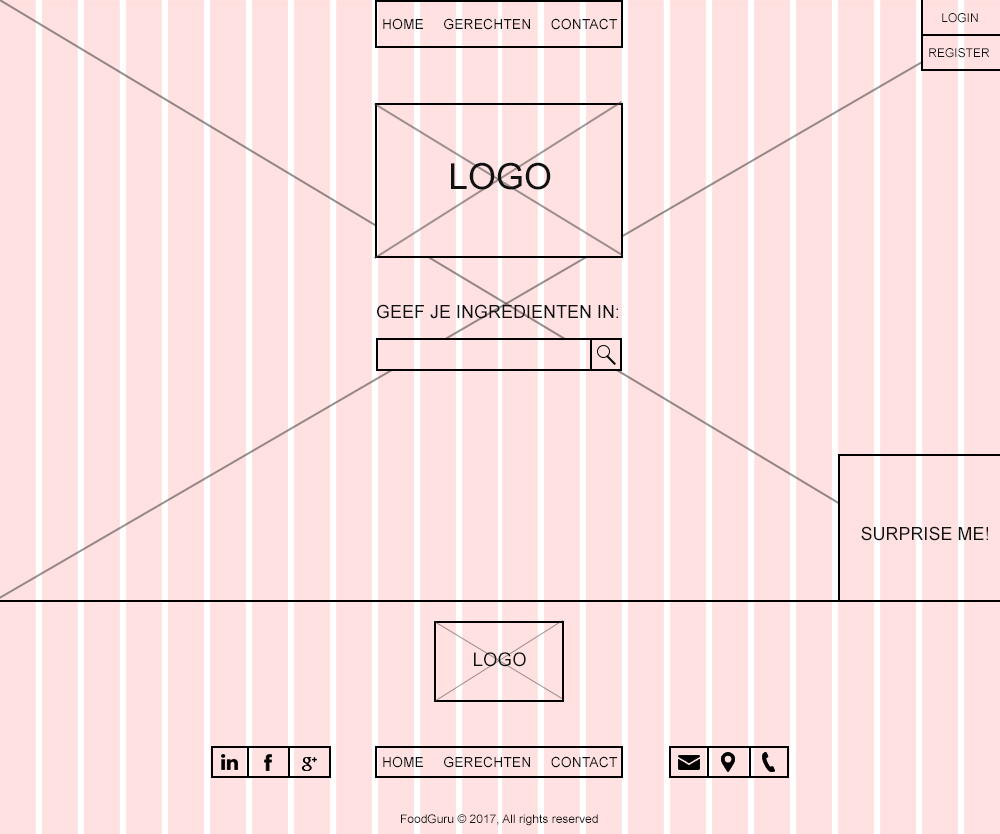
<style>
.page{position:relative;width:1000px;height:834px;background:#ffe1e1}
.page>*{position:absolute;margin:0}
.t1{font:12px "ArialMT";color:#111111}
.t2{font:14px "ArialMT";color:#111111}
.t3{font:36.1px "ArialMT";color:#111111}
.t4{font:18px "ArialMT";color:#111111}
.t5{font:18.7px "ArialMT";color:#111111}
.t6{font:11.8px "ArialMT";color:#111111}
</style>
<div class="page">
<p class="t1" style="left:942px;top:13px;width:36px;height:10px">LOGIN</p>
<p class="t2" style="left:383px;top:18px;width:234px;height:12px">HOME     GERECHTEN     CONTACT</p>
<p class="t1" style="left:929px;top:48px;width:60px;height:10px">REGISTER</p>
<p class="t3" style="left:451px;top:162px;width:100px;height:28px">LOGO</p>
<p class="t4" style="left:377px;top:304px;width:241px;height:15px">GEEF JE INGREDIENTEN IN:</p>
<p class="t4" style="left:861px;top:526px;width:127px;height:15px">SURPRISE ME!</p>
<p class="t5" style="left:474px;top:652px;width:52px;height:15px">LOGO</p>
<p class="t2" style="left:383px;top:756px;width:234px;height:12px">HOME     GERECHTEN     CONTACT</p>
<p class="t6" style="left:401px;top:814px;width:197px;height:12px">FoodGuru © 2017, All rights reserved</p>
</div>
